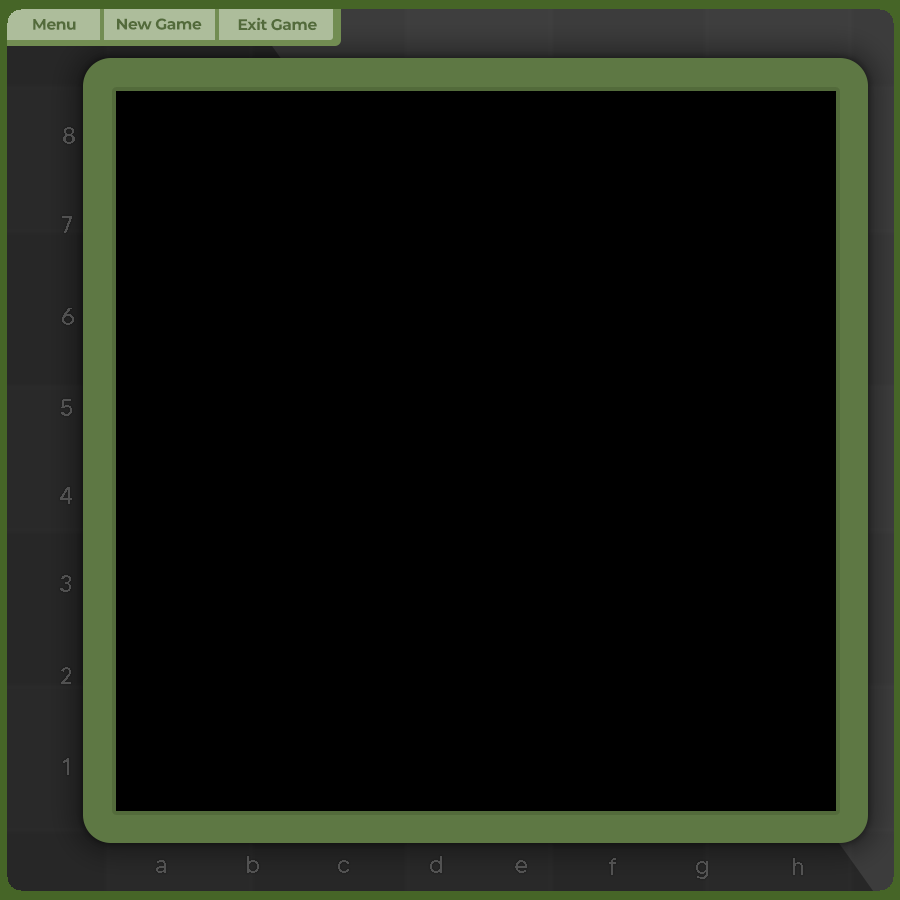
<style>
.page{position:relative;width:900px;height:900px;background:#000000}
.page>*{position:absolute;margin:0}
.t1{font:15.5px "MontserratRoman-Bold";letter-spacing:-0.025em;color:#536b3b}
.t2{font:24px "MADETOMMY";color:#505050}
.t3{font:24px "MADETOMMY";color:#515151}
.t4{font:24px "MADETOMMY";color:#525252}
</style>
<div class="page">
<p class="t1" style="left:238px;top:17px;width:79px;height:14px">Exit Game</p>
<p class="t1" style="left:33px;top:19px;width:43px;height:11px">Menu</p>
<p class="t1" style="left:117px;top:18px;width:85px;height:12px">New Game</p>
<p class="t2" style="left:63px;top:127px;width:12px;height:17px">8</p>
<p class="t3" style="left:62px;top:216px;width:10px;height:17px">7</p>
<p class="t2" style="left:62px;top:308px;width:12px;height:17px">6</p>
<p class="t3" style="left:61px;top:399px;width:11px;height:17px">5</p>
<p class="t3" style="left:60px;top:487px;width:12px;height:17px">4</p>
<p class="t2" style="left:60px;top:575px;width:11px;height:17px">3</p>
<p class="t2" style="left:61px;top:667px;width:10px;height:17px">2</p>
<p class="t3" style="left:63px;top:758px;width:6px;height:17px">1</p>
<p class="t4" style="left:247px;top:856px;width:12px;height:17px">b</p>
<p class="t4" style="left:430px;top:856px;width:12px;height:17px">d</p>
<p class="t4" style="left:156px;top:860px;width:10px;height:13px">a</p>
<p class="t3" style="left:338px;top:860px;width:11px;height:13px">c</p>
<p class="t4" style="left:515px;top:860px;width:12px;height:13px">e</p>
<p class="t3" style="left:609px;top:858px;width:7px;height:17px">f</p>
<p class="t4" style="left:696px;top:861px;width:12px;height:18px">g</p>
<p class="t4" style="left:793px;top:858px;width:10px;height:17px">h</p>
</div>
